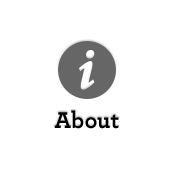
<style>
.page{position:relative;width:175px;height:175px;background:#ffffff}
.page>*{position:absolute;margin:0}
.t1{font:24px "Archer-Bold";color:#000000}
</style>
<div class="page">
<p class="t1" style="left:54px;top:110px;width:65px;height:19px">About</p>
</div>
